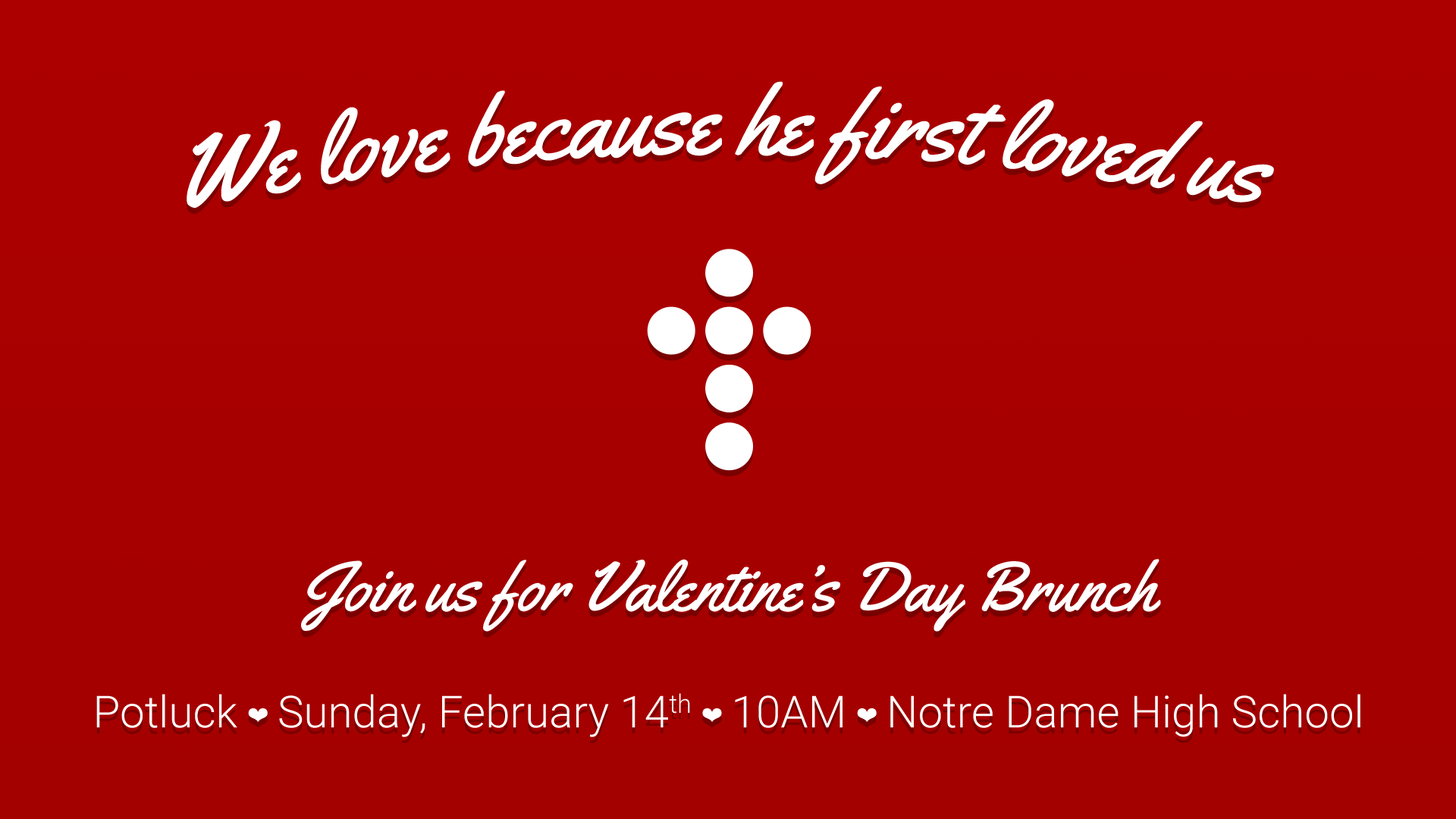
<style>
.page{position:relative;width:1456px;height:819px}
.page>*{position:absolute;margin:0}
.t1{font:98px "Yellowtail";color:#ffffff}
.t2{font:69.5px "Yellowtail";color:#ffffff}
.t3{font:44.2px "Roboto-Light";color:#ffffff}
.t4{font:22.1px "ZapfDingbatsITC";color:#ffffff}
</style>
<div class="page">
<p class="t1" style="left:187px;top:81px;width:1087px;height:128px">We love because he first loved us</p>
<p class="t2" style="left:301px;top:559px;width:860px;height:73px">Join us for Valentine’s Day Brunch</p>
<p class="t3" style="left:96px;top:693px;width:1264px;height:44px">Potluck <span class="t4">❤ </span>Sunday, February 14th <span class="t4">❤ </span>10AM <span class="t4">❤ </span>Notre Dame High School</p>
</div>
